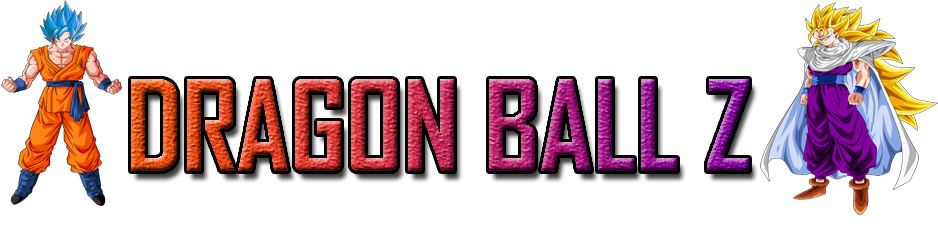
<style>
.page{position:relative;width:938px;height:250px;background:#ffffff}
.page>*{position:absolute;margin:0}
.t1{font:120.1px "AgencyFB-Bold"}
</style>
<div class="page">
<p class="t1" style="left:131px;top:79px;width:618px;height:92px">DRAGON BALL Z</p>
</div>
